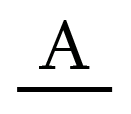
<style>
.page{position:relative;width:131px;height:114px;background:#ffffff}
.page>*{position:absolute;margin:0}
.t1{font:72px "Sylfaen";color:#000100}
</style>
<div class="page">
<p class="t1" style="left:39px;top:20px;width:51px;height:49px">A</p>
</div>
